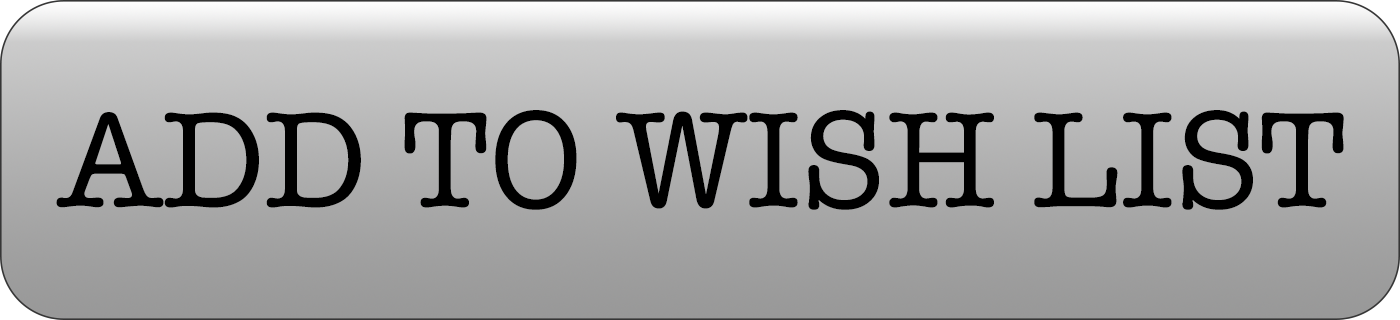
<style>
.page{position:relative;width:1400px;height:320px}
.page>*{position:absolute;margin:0}
.t1{font:140px "AmericanTypewriter";color:#000000}
</style>
<div class="page">
<p class="t1" style="left:56px;top:110px;width:1288px;height:100px">ADD TO WISH LIST</p>
</div>
